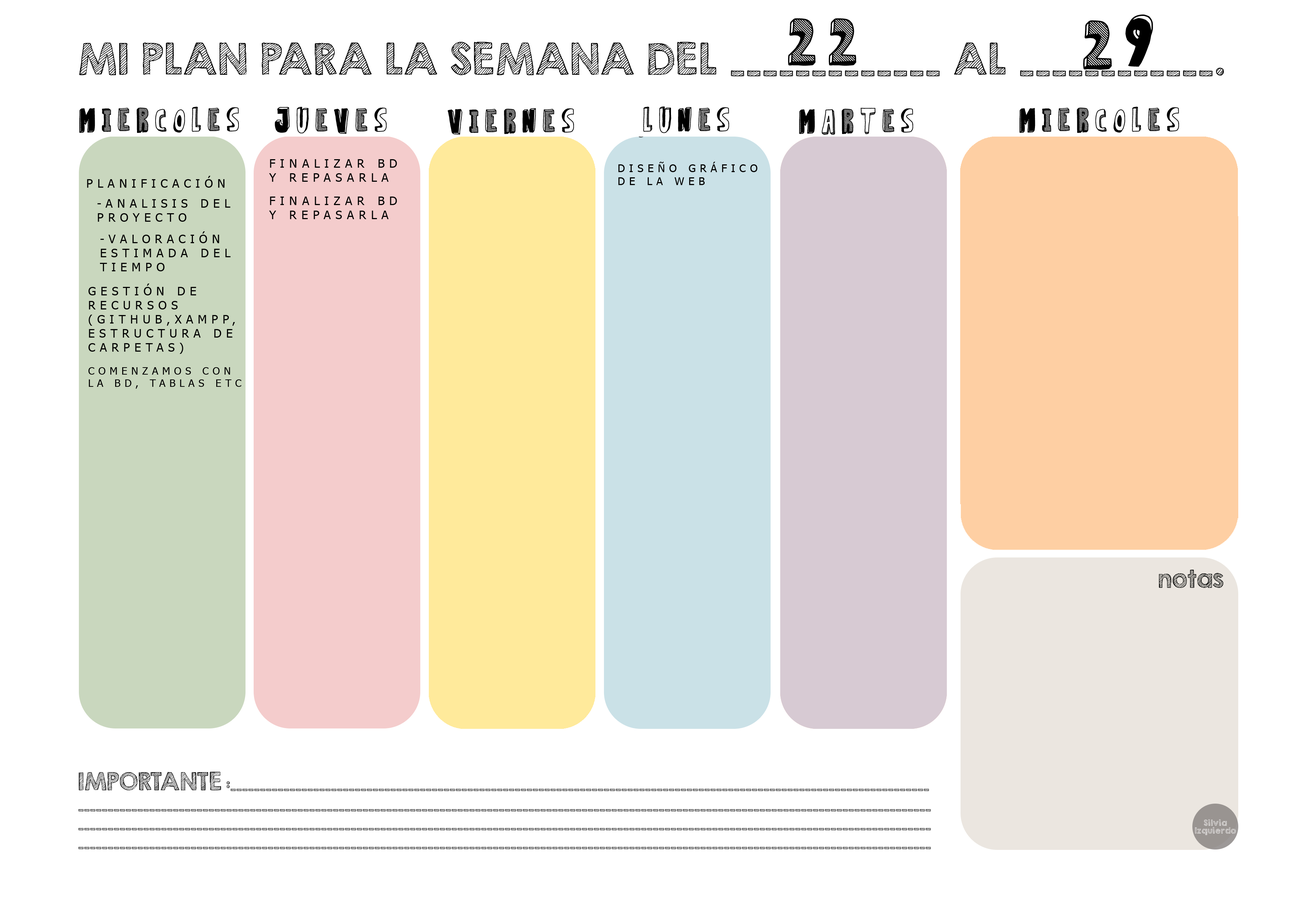
<style>
.page{position:relative;width:1299px;height:918px;background:#ffffff}
.page>*{position:absolute;margin:0}
.t1{font:29.4px "StrangeMagic";letter-spacing:0.4em;color:#000000;text-transform:uppercase}
.t2{font:28.3px "StrangeMagic";letter-spacing:0.4em;color:#000000;text-transform:uppercase}
.t3{font:15px "StrangeMagic";letter-spacing:0.4em;color:#000000;text-transform:uppercase}
.t4{font:11.9px "Tahoma";letter-spacing:0.4em;color:#000000;text-transform:uppercase}
.t5{font:10.6px "Tahoma";letter-spacing:0.4em;color:#000000;text-transform:uppercase}
.t6{font:11.7px "Tahoma";letter-spacing:0.4em;color:#000000;text-transform:uppercase}
.t7{font:10.2px "Tahoma";letter-spacing:0.4em;color:#000000;text-transform:uppercase}
</style>
<div class="page">
<p class="t1" style="left:1083px;top:14px;width:70px;height:56px">29</p>
<p class="t2" style="left:788px;top:18px;width:68px;height:48px">22</p>
<p class="t3" style="left:79px;top:107px;width:160px;height:26px">MIERCOLES</p>
<p class="t3" style="left:275px;top:107px;width:112px;height:27px">JUEVES</p>
<p class="t3" style="left:448px;top:108px;width:126px;height:27px">VIERNES</p>
<p class="t3" style="left:643px;top:106px;width:86px;height:27px">LUNES</p>
<p class="t3" style="left:799px;top:108px;width:114px;height:27px">MARTES</p>
<p class="t3" style="left:1019px;top:107px;width:160px;height:26px">MIERCOLES</p>
<p class="t4" style="left:269px;top:159px;width:128px;height:23px">FINALIZAR BD<br>Y REPASARLA</p>
<p class="t5" style="left:618px;top:162px;width:139px;height:23px">DISEÑO GRÁFICO<br>DE LA WEB</p>
<p class="t6" style="left:87px;top:176px;width:138px;height:12px">PLANIFICACIÓN</p>
<p class="t4" style="left:269px;top:197px;width:128px;height:22px">FINALIZAR BD<br>Y REPASARLA</p>
<p class="t6" style="left:97px;top:199px;width:133px;height:23px">-ANALISIS DEL<br>PROYECTO</p>
<p class="t6" style="left:100px;top:231px;width:131px;height:40px">-VALORACIÓN<br>ESTIMADA DEL<br>TIEMPO</p>
<p class="t6" style="left:88px;top:284px;width:147px;height:70px">GestiÓN DE <br>RECURSOS<br>(GITHUB,XAMPP,<br>ESTRUCTURA DE<br>CARPETAS)</p>
<p class="t7" style="left:88px;top:367px;width:153px;height:22px">Comenzamos con<br>la BD, tablas etc</p>
</div>
